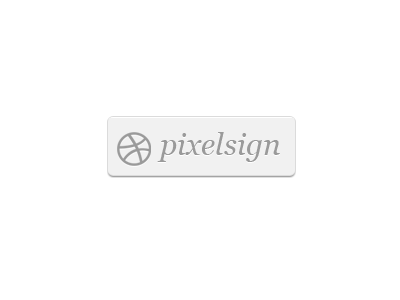
<style>
.page{position:relative;width:400px;height:300px;background:#ffffff}
.page>*{position:absolute;margin:0}
.t1{font:30px "Georgia-Italic";color:#9a9a9a}
</style>
<div class="page">
<p class="t1" style="left:157px;top:133px;width:123px;height:30px">pixelsign</p>
<p class="t1" style="left:157px;top:132px;width:123px;height:30px">pixelsign</p>
</div>
